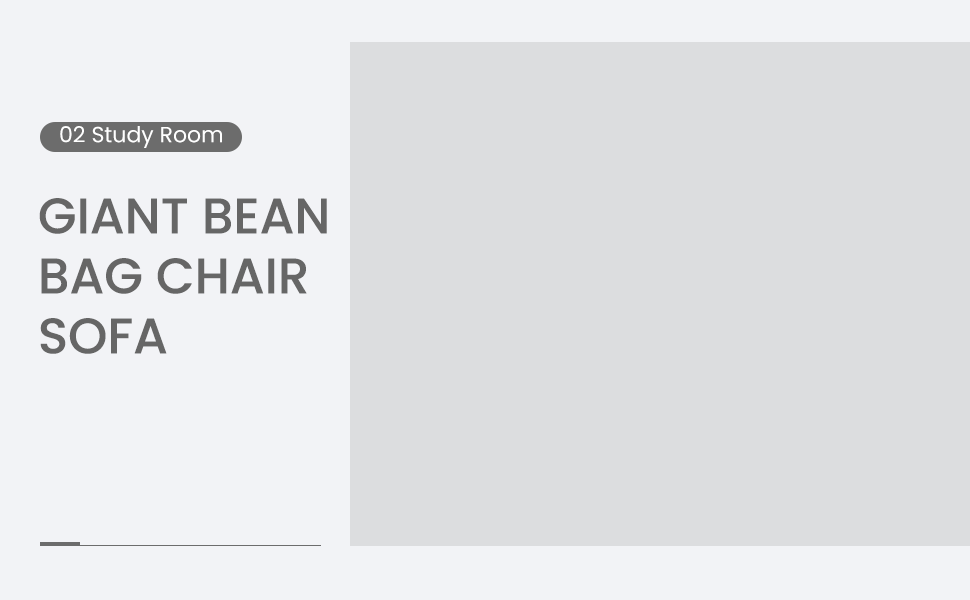
<style>
.page{position:relative;width:970px;height:600px;background:#dcdddf}
.page>*{position:absolute;margin:0}
.t1{font:22px "Poppins-Regular";color:#ffffff}
.t2{font:50px "Poppins-Medium";color:#666666;text-transform:uppercase}
</style>
<div class="page">
<p class="t1" style="left:60px;top:126px;width:162px;height:22px">02 Study Room</p>
<p class="t2" style="left:39px;top:198px;width:288px;height:156px">Giant Bean<br>Bag Chair<br>Sofa</p>
</div>
